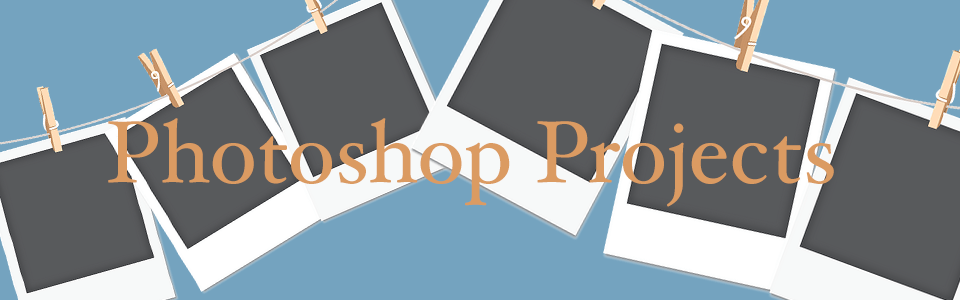
<style>
.page{position:relative;width:960px;height:300px;background:#74a3bf}
.page>*{position:absolute;margin:0}
.t1{font:88px "HoeflerText-Regular";color:#db9b62}
</style>
<div class="page">
<p class="t1" style="left:108px;top:118px;width:726px;height:89px">Photoshop Projects</p>
</div>
